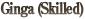
<style>
.page{position:relative;width:85px;height:19px;background:#ffffff}
.page>*{position:absolute;margin:0}
.t1{font:16px "RyuminPro-ExBold";letter-spacing:-0.09em;color:#4a3f32;font-weight:bold;scale:0.85 1}
</style>
<div class="page">
<p class="t1" style="left:0px;top:1px;width:84px;height:17px">Ginga (Skilled)</p>
</div>
